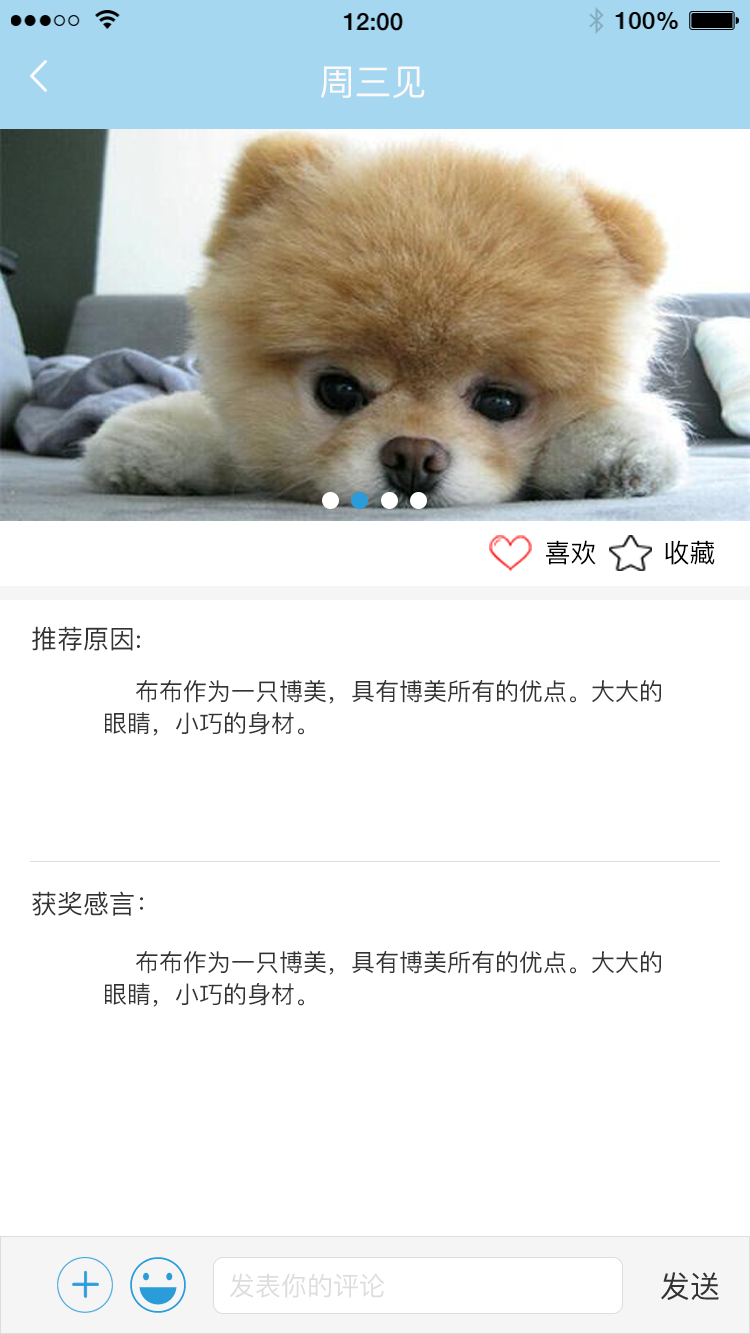
<style>
.page{position:relative;width:750px;height:1334px;background:#ffffff}
.page>*{position:absolute;margin:0}
.t1{font:36px "PingFangSC-Regular";color:#fdf9f9}
.t2{font:26px "PingFangSC-Regular";color:#000000}
.t3{font:26px "PingFangSC-Regular";color:#333333}
.t4{font:24px/32px "PingFangSC-Regular";color:#333333}
.t5{font:26px "PingFangSC";color:#dddddd}
.t6{font:30px "PingFangSC";color:#333333}
</style>
<div class="page">
<p class="t1" style="left:321px;top:66px;width:104px;height:33px">周三见</p>
<p class="t2" style="left:546px;top:540px;width:50px;height:25px">喜欢</p>
<p class="t2" style="left:665px;top:540px;width:50px;height:25px">收藏</p>
<p class="t3" style="left:32px;top:626px;width:108px;height:25px">推荐原因:</p>
<p class="t4" style="left:105px;top:680px;width:556px;height:56px">布布作为一只博美，具有博美所有的优点。大大的<br>眼睛，小巧的身材。</p>
<p class="t3" style="left:32px;top:891px;width:111px;height:25px">获奖感言：</p>
<p class="t4" style="left:105px;top:951px;width:556px;height:56px">布布作为一只博美，具有博美所有的优点。大大的<br>眼睛，小巧的身材。</p>
<p class="t5" style="left:230px;top:1273px;width:155px;height:25px">发表你的评论</p>
<p class="t6" style="left:661px;top:1272px;width:58px;height:28px">发送</p>
</div>
